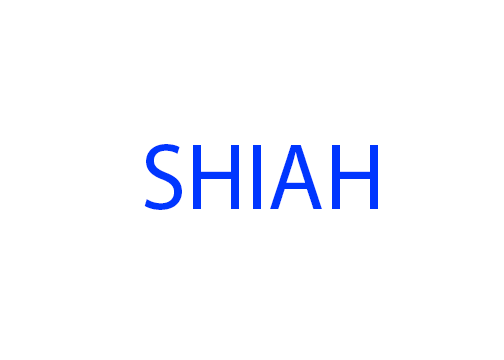
<style>
.page{position:relative;width:504px;height:360px;background:#ffffff}
.page>*{position:absolute;margin:0}
.t1{font:95px "MyriadPro-Regular";color:#0036ff;scale:0.97 1}
</style>
<div class="page">
<p class="t1" style="left:144px;top:144px;width:234px;height:66px">SHIAH</p>
</div>
